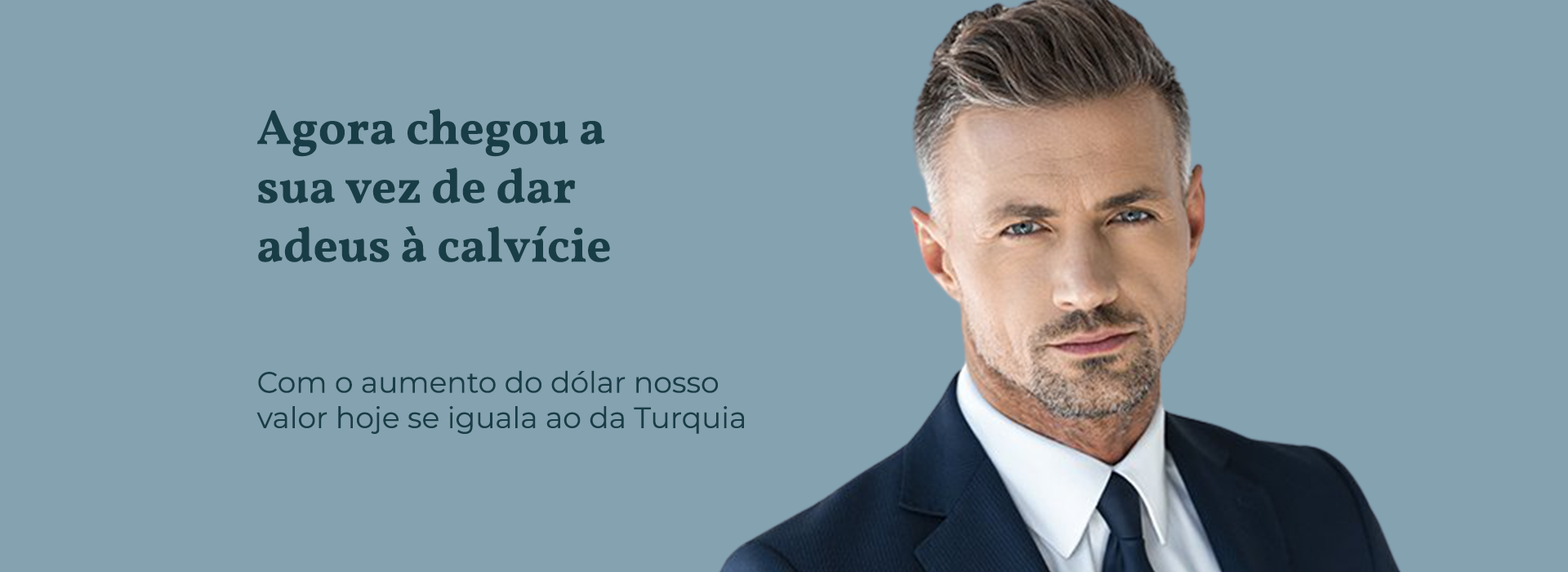
<style>
.page{position:relative;width:1568px;height:572px;background:#84a2b0}
.page>*{position:absolute;margin:0}
.t1{font:49px "Vollkorn-Bold";color:#193d46}
.t2{font:29.4px "Montserrat-Regular";color:#193d46}
</style>
<div class="page">
<p class="t1" style="left:257px;top:109px;width:353px;height:153px">Agora chegou a <br>sua vez de dar <br>adeus à calvície</p>
<p class="t2" style="left:256px;top:370px;width:488px;height:64px">Com o aumento do dólar nosso <br>valor hoje se iguala ao da Turquia</p>
</div>
